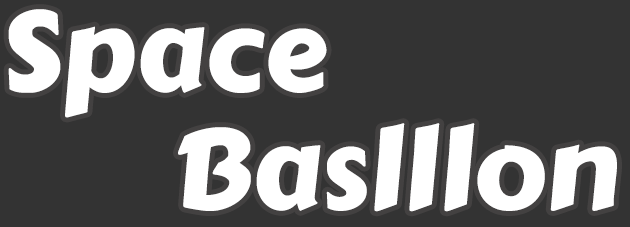
<style>
.page{position:relative;width:630px;height:227px;background:#333333}
.page>*{position:absolute;margin:0}
.t1{font:112.8px/118.2px "CarterOne";color:#ffffff}
</style>
<div class="page">
<p class="t1" style="left:8px;top:9px;width:609px;height:203px">Space<br>       Baslllon</p>
</div>
